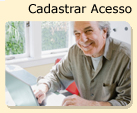
<style>
.page{position:relative;width:137px;height:113px}
.page>*{position:absolute;margin:0}
.t1{font:12px "Verdana";color:#000000}
</style>
<div class="page">
<p class="t1" style="left:28px;top:3px;width:104px;height:11px">Cadastrar Acesso</p>
</div>
